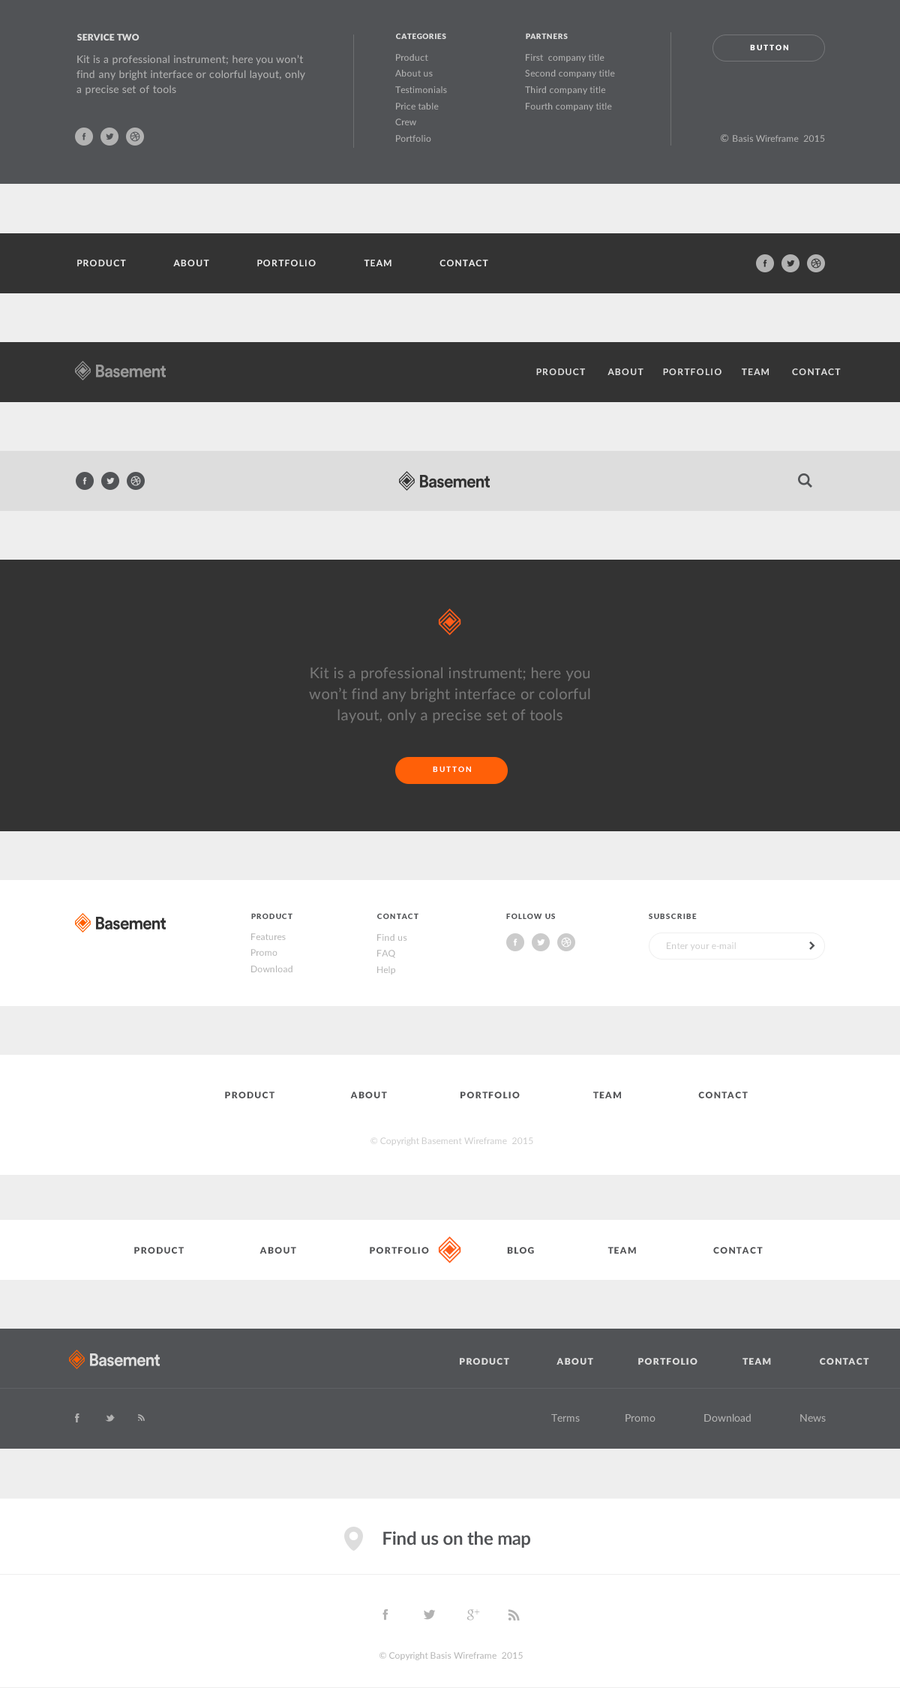
<style>
.page{position:relative;width:900px;height:1688px;background:#ffffff}
.page>*{position:absolute;margin:0}
.t1{font:9px "Lato-Black";color:#dddddd}
.t2{font:7.5px "Lato-Black";letter-spacing:0.05em;color:#dddddd}
.t3{font:9px/16.2px "Lato-Regular";letter-spacing:0.02em;color:#b2b2b2}
.t4{font:7.5px "Lato-Black";letter-spacing:0.2em;color:#ffffff}
.t5{font:10.5px/14.7px "Lato-Regular";letter-spacing:0.02em;color:#b2b2b2}
.t6{font:9px "Lato-Regular";letter-spacing:0.02em;color:#b2b2b2}
.t7{font:10.5px "Lato-Regular";color:#b2b2b2}
.t8{font:9px "Lato-Bold";letter-spacing:0.1em;color:#ececec}
.t9{font:9px "Lato-Bold";letter-spacing:0.1em;color:#dddddd}
.t10{font:15px/21px "Lato-Regular";letter-spacing:0.02em;color:#777777}
.t11{font:7.5px "Lato-Bold";letter-spacing:0.2em;color:#ffffff}
.t12{font:7.5px "Lato-Black";letter-spacing:0.1em;color:#515356}
.t13{font:9px "Lato-Regular";letter-spacing:0.02em;color:#cbcbcb}
.t14{font:9px "Lato-Black";letter-spacing:0.1em;color:#515255}
.t15{font:9px "Lato-Regular";color:#cbcbcb}
.t16{font:9px "Lato-Black";letter-spacing:0.1em;color:#dddddd}
.t17{font:18px "Lato-Bold";letter-spacing:-0.02em;color:#515356}
.t18{font:9px "Lato-Regular";color:#b2b2b2}
</style>
<div class="page">
<p class="t1" style="left:77px;top:34px;width:63px;height:6px">SERVICE TWO</p>
<p class="t2" style="left:396px;top:33px;width:50px;height:6px">CATEGORIES</p>
<p class="t2" style="left:526px;top:33px;width:42px;height:6px">PARTNERS</p>
<p class="t3" style="left:395px;top:54px;width:52px;height:88px">Product<br>About us<br>Testimonials<br>Price table<br>Crew<br>Portfolio</p>
<p class="t3" style="left:525px;top:54px;width:90px;height:57px">First  company title<br>Second company title<br>Third company title<br>Fourth company title</p>
<p class="t4" style="left:750px;top:44px;width:38px;height:6px">BUTTON</p>
<p class="t5" style="left:76px;top:55px;width:229px;height:40px">Kit is a professional instrument; here you won’t find any bright interface or colorful layout, only a precise set of tools</p>
<p class="t6" style="left:721px;top:134px;width:104px;height:8px"><span class="t7">© </span>Basis Wireframe  2015</p>
<p class="t8" style="left:77px;top:260px;width:411px;height:6px">PRODUCT               ABOUT               PORTFOLIO               TEAM               CONTACT</p>
<p class="t9" style="left:536px;top:368px;width:305px;height:7px">PRODUCT       ABOUT      PORTFOLIO      TEAM       CONTACT</p>
<p class="t10" style="left:309px;top:667px;width:281px;height:56px;text-align:center">Kit is a professional instrument; here you won’t find any bright interface or colorful layout, only a precise set of tools</p>
<p class="t11" style="left:433px;top:766px;width:38px;height:6px">BUTTON</p>
<p class="t12" style="left:251px;top:913px;width:41px;height:6px">PRODUCT</p>
<p class="t12" style="left:377px;top:913px;width:41px;height:6px">CONTACT</p>
<p class="t12" style="left:506px;top:913px;width:49px;height:6px">FOLLOW US</p>
<p class="t12" style="left:649px;top:913px;width:48px;height:6px">SUBSCRIBE</p>
<p class="t3" style="left:251px;top:933px;width:41px;height:39px">Features<br>Promo<br>Download</p>
<p class="t3" style="left:377px;top:934px;width:30px;height:40px">Find us<br>FAQ<br>Help</p>
<p class="t13" style="left:667px;top:942px;width:69px;height:8px">Enter your e-mail</p>
<p class="t14" style="left:225px;top:1091px;width:523px;height:7px">PRODUCT                        ABOUT                       PORTFOLIO                       TEAM                        CONTACT</p>
<p class="t13" style="left:370px;top:1137px;width:163px;height:8px"><span class="t15">© Copyright </span>Basement Wireframe  2015</p>
<p class="t14" style="left:134px;top:1246px;width:295px;height:7px">PRODUCT                        ABOUT                       PORTFOLIO</p>
<p class="t14" style="left:507px;top:1246px;width:256px;height:7px">BLOG                       TEAM                        CONTACT</p>
<p class="t16" style="left:460px;top:1358px;width:409px;height:6px">PRODUCT               ABOUT              PORTFOLIO              TEAM               CONTACT</p>
<p class="t7" style="left:551px;top:1413px;width:275px;height:8px">Terms               Promo                Download                News</p>
<p class="t17" style="left:383px;top:1531px;width:147px;height:16px">Find us on the map</p>
<p class="t6" style="left:380px;top:1652px;width:143px;height:8px"><span class="t18">© Copyright </span>Basis Wireframe  2015</p>
</div>
